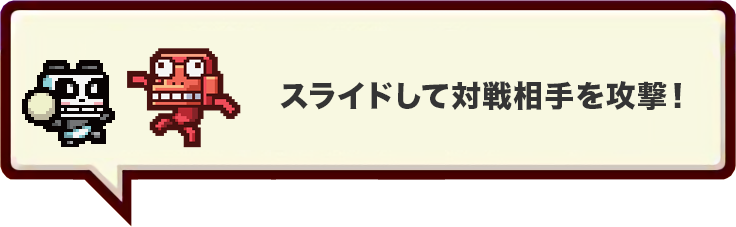
<style>
.page{position:relative;width:736px;height:227px;background:#f8f8e1}
.page>*{position:absolute;margin:0}
.t1{font:30px "HiraKakuStdN-W8";letter-spacing:0.04em;color:#343434}
</style>
<div class="page">
<p class="t1" style="left:280px;top:81px;width:401px;height:29px">スライドして対戦相手を攻撃！</p>
</div>
